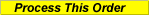
<style>
.page{position:relative;width:150px;height:15px;background:#fffc00}
.page>*{position:absolute;margin:0}
.t1{font:12px "Arial-BoldItalicMT";color:#000000}
</style>
<div class="page">
<p class="t1" style="left:14px;top:3px;width:112px;height:10px">Process This Order</p>
</div>
